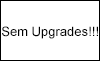
<style>
.page{position:relative;width:100px;height:61px;background:#ffffff}
.page>*{position:absolute;margin:0}
.t1{font:13px "ArialMT";color:#000000}
</style>
<div class="page">
<p class="t1" style="left:2px;top:26px;width:96px;height:13px">Sem Upgrades!!!</p>
</div>
